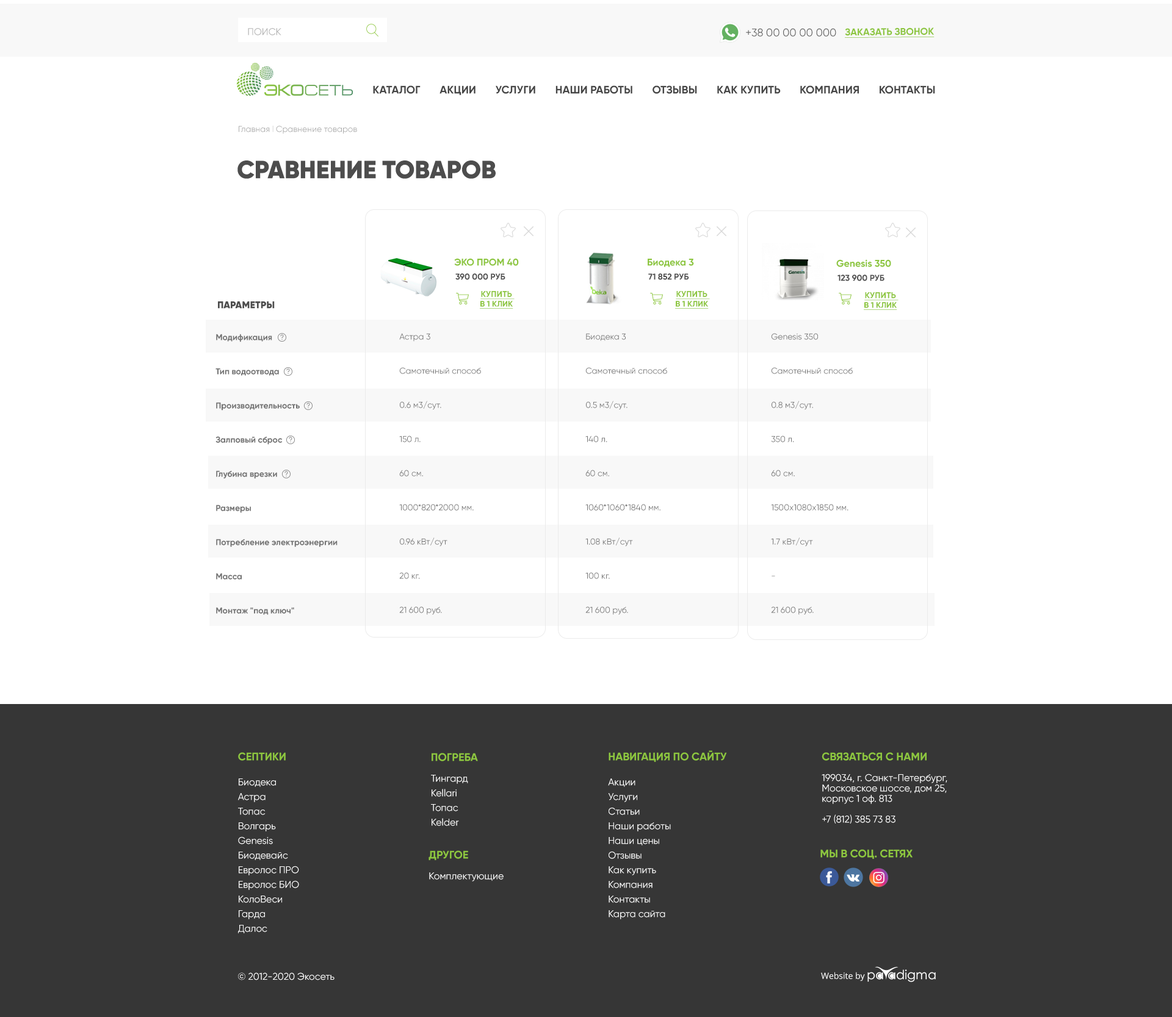
<style>
.page{position:relative;width:1172px;height:1017px;background:#ffffff}
.page>*{position:absolute;margin:0}
.t1{font:9.8px "Gilroy-Regular";color:#b1b1b1;text-transform:uppercase}
.t2{font:11px "Gilroy-Regular";color:#636363;text-transform:uppercase}
.t3{font:9.8px "Gilroy-Bold";color:#8dc63f;text-transform:uppercase;text-decoration:underline}
.t4{font:11px "Gilroy-Bold";color:#464646;text-transform:uppercase}
.t5{font:8.5px "Gilroy-Regular";color:#acacac}
.t6{font:8.5px "Gilroy-Regular";color:#d7d7d7}
.t7{font:25px "Gilroy-Black";color:#4c4c4c;text-transform:uppercase}
.t8{font:9.8px "Gilroy-Bold";color:#8dc63f}
.t9{font:8.5px "Gilroy-Bold";color:#4c4c4c;text-transform:uppercase}
.t10{font:8.1px/9.6px "Gilroy-Bold";color:#8dc63f;text-transform:uppercase;text-decoration:underline}
.t11{font:8.6px/9.6px "Gilroy-Bold";color:#8dc63f;text-transform:uppercase;text-decoration:underline}
.t12{font:9.8px "Gilroy-Black";color:#4c4c4c;text-transform:uppercase}
.t13{font:8.5px/34.2px "Gilroy-Bold";color:#737373}
.t14{font:8.5px/34.2px "Gilroy-Regular";color:#737373}
.t15{font:9.8px/14.6px "Gilroy-Regular";color:#ffffff}
.t16{font:11px/10.4px "Gilroy-Bold";color:#8dc63f;text-transform:uppercase}
.t17{font:9.8px/10.4px "Gilroy-Regular";color:#ffffff}
.t18{font:11px/25px "Gilroy-Bold";color:#ffffff;text-transform:uppercase}
.t19{font:11px "Gilroy-Bold";color:#8dc63f;text-transform:uppercase}
.t20{font:11px "Gilroy-Bold";color:#ffffff;text-transform:uppercase}
.t21{font:9.8px "Gilroy-Regular";color:#ffffff}
.t22{font:8.5px "OpenSans";color:#ffffff}
</style>
<div class="page">
<p class="t1" style="left:248px;top:28px;width:33px;height:7px">поиск</p>
<p class="t2" style="left:746px;top:28px;width:90px;height:9px">+38 00 00 00 000</p>
<p class="t3" style="left:845px;top:27px;width:89px;height:11px;rotate:-1deg">заказать звонок</p>
<p class="t4" style="left:373px;top:85px;width:562px;height:10px">Каталог       Акции       Услуги       Наши работы       отзывы       Как купить       Компания       Контакты</p>
<p class="t5" style="left:239px;top:126px;width:118px;height:8px">Главная <span class="t6">l </span>Сравнение товаров</p>
<p class="t7" style="left:237px;top:161px;width:259px;height:18px">Сравнение товаров</p>
<p class="t8" style="left:454px;top:258px;width:65px;height:8px">ЭКО ПРОМ 40</p>
<p class="t8" style="left:648px;top:259px;width:46px;height:8px">Биодека 3</p>
<p class="t8" style="left:836px;top:259px;width:55px;height:8px">Genesis 350</p>
<p class="t9" style="left:455px;top:273px;width:50px;height:7px">390 000 руб</p>
<p class="t9" style="left:648px;top:273px;width:41px;height:7px">71 852 руб</p>
<p class="t9" style="left:837px;top:275px;width:47px;height:6px">123 900 руб</p>
<p class="t10" style="left:480px;top:291px;width:35px;height:18px;text-align:center"><span class="t11">купить <br></span>в 1 клик</p>
<p class="t10" style="left:675px;top:291px;width:35px;height:18px;text-align:center"><span class="t11">купить <br></span>в 1 клик</p>
<p class="t10" style="left:864px;top:292px;width:34px;height:18px;text-align:center"><span class="t11">купить <br></span>в 1 клик</p>
<p class="t12" style="left:218px;top:302px;width:57px;height:7px">параметры</p>
<p class="t13" style="left:215px;top:334px;width:123px;height:281px">Модификация      <br>Тип водоотвода    <br>Производительность <br>Залповый сброс    <br>Глубина врезки <br>Размеры<br>Потребление электроэнергии<br>Масса<br>Монтаж "под ключ"</p>
<p class="t14" style="left:399px;top:333px;width:82px;height:282px">Астра 3<br>Cамотечный способ<br>0.6 м3/сут.<br>150 л.<br>60 см.<br>1000*820*2000 мм.<br>0.96 кВт/сут<br>20 кг.<br>21 600 руб.</p>
<p class="t14" style="left:585px;top:333px;width:82px;height:282px">Биодека 3<br>Cамотечный способ<br>0.5 м3/сут.<br>140 л.<br>60 см.<br>1060*1060*1840 мм.<br>1.08 кВт/сут<br>100 кг.<br>21 600 руб.</p>
<p class="t14" style="left:771px;top:333px;width:82px;height:282px">Genesis 350<br>Cамотечный способ<br>0.8 м3/сут.<br>350 л.<br>60 см.<br>1500х1080х1850 мм.<br>1.7 кВт/сут<br>- <br>21 600 руб.</p>
<p class="t15" style="left:238px;top:753px;width:61px;height:181px"><span class="t16">Септики<br><br></span>Биодека <br>Астра <br>Топас <br>Волгарь <br>Genesis <br>Биодевайс <br>Евролос ПРО <br>Евролос БИО <br>КолоВеси <br>Гарда <br>Далос</p>
<p class="t15" style="left:431px;top:753px;width:47px;height:73px"><span class="t16">погреба<br></span><span class="t17"><br>Тингард<br></span>Kellari<br>Топас<br>Kelder</p>
<p class="t15" style="left:608px;top:751px;width:119px;height:169px"><span class="t18"><br></span><span class="t16">навигация по сайту<br></span><span class="t17"><br>Акции   </span>    <br>Услуги       <br>Статьи       <br>Наши работы <br>Наши цены<br>Отзывы      <br>Как купить       <br>Компания       <br>Контакты<br>Карта сайта</p>
<p class="t17" style="left:822px;top:753px;width:125px;height:71px"><span class="t18"><br></span><span class="t16">связаться с нами <br></span><br>199034, г. Санкт-Петербург, <br>Московское шоссе, дом 25, <br>корпус 1 оф. 813<br><br>+7 (812) 385 73 83</p>
<p class="t17" style="left:428px;top:851px;width:76px;height:31px"><span class="t18"><br></span><span class="t16">Другое<br></span><br>Комплектующие</p>
<p class="t19" style="left:820px;top:850px;width:93px;height:9px"><span class="t20"><br></span>мы в соц. сетях</p>
<p class="t21" style="left:238px;top:973px;width:96px;height:8px">© 2012-2020 Экосеть</p>
<p class="t22" style="left:821px;top:972px;width:44px;height:9px">Website by</p>
</div>
